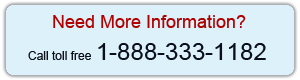
<style>
.page{position:relative;width:300px;height:80px;background:#dcf1f9}
.page>*{position:absolute;margin:0}
.t1{font:18px "ArialMT";color:#b00000}
.t2{font:12px "ArialMT";color:#0b0f1a}
.t3{font:24px "ArialMT";color:#0b0f1a}
</style>
<div class="page">
<p class="t1" style="left:53px;top:15px;width:193px;height:13px">Need More Information?</p>
<p class="t2" style="left:28px;top:43px;width:238px;height:17px">Call toll free <span class="t3">1-888-333-1182</span></p>
</div>
